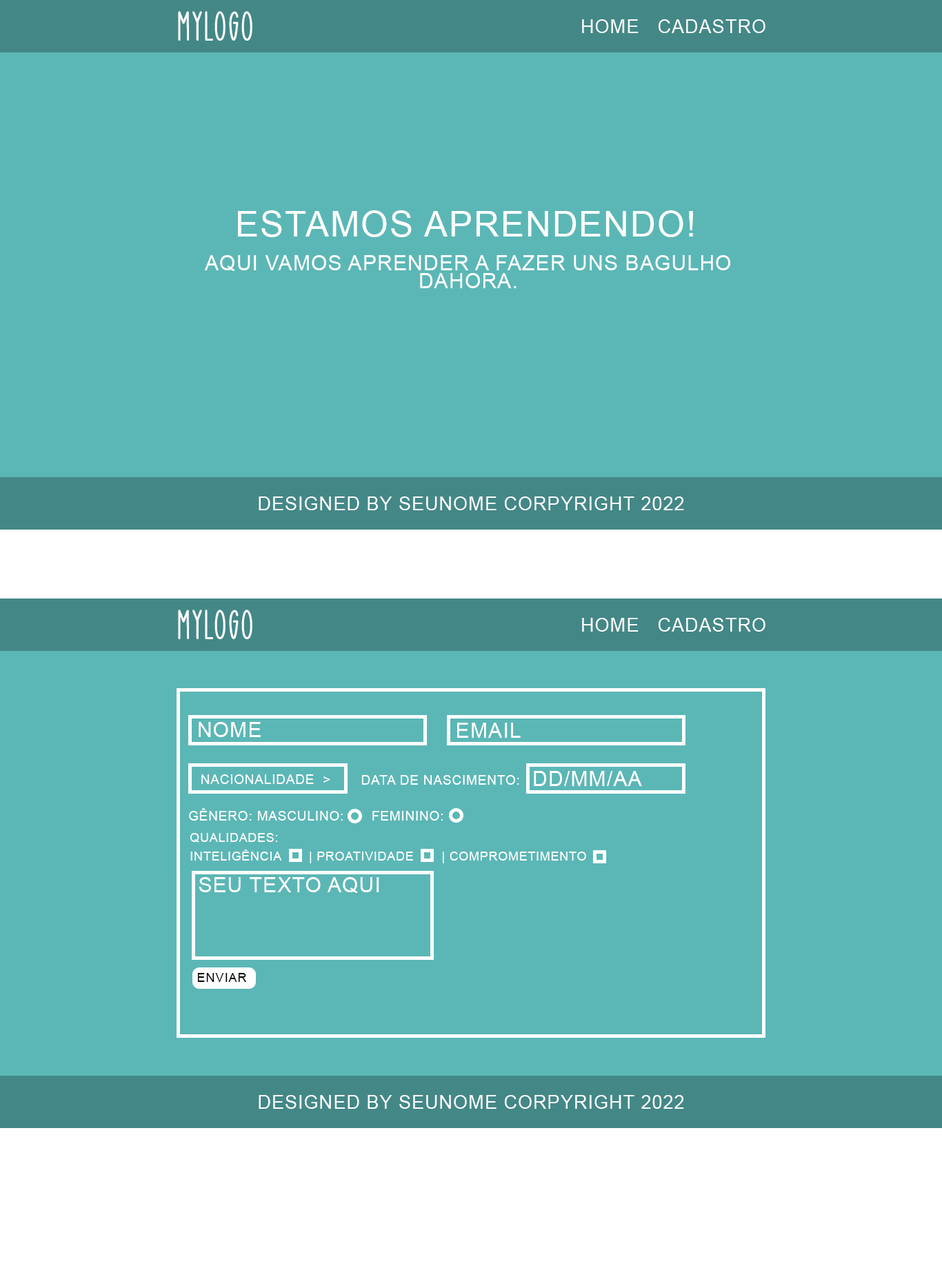
<style>
.page{position:relative;width:942px;height:1266px;background:#5bb7b6}
.page>*{position:absolute;margin:0}
.t1{font:41.9px "ChristmasLightRegular";letter-spacing:0.04em;color:#ffffff}
.t2{font:18.6px "ArialMT";letter-spacing:0.04em;color:#ffffff}
.t3{font:35.2px "ArialMT";letter-spacing:0.04em;color:#ffffff}
.t4{font:20.7px/18.3px "ArialMT";letter-spacing:0.04em;color:#ffffff}
.t5{font:20.7px "ArialMT";letter-spacing:0.04em;color:#ffffff}
.t6{font:13.1px "ArialMT";letter-spacing:0.04em;color:#ffffff}
.t7{font:13.2px "ArialMT";letter-spacing:0.04em;color:#ffffff}
.t8{font:12.4px/18.3px "ArialMT";letter-spacing:0.04em;color:#ffffff}
.t9{font:12.7px "ArialMT";letter-spacing:0.04em;color:#000000}
</style>
<div class="page">
<p class="t1" style="left:178px;top:11px;width:74px;height:30px">MyLogo</p>
<p class="t2" style="left:582px;top:19px;width:57px;height:14px">HOME</p>
<p class="t2" style="left:659px;top:19px;width:106px;height:14px">CADASTRO</p>
<p class="t3" style="left:238px;top:210px;width:455px;height:27px">ESTAMOS APRENDENDO!</p>
<p class="t4" style="left:204px;top:255px;width:526px;height:33px;text-align:center">AQUI VAMOS APRENDER A FAZER UNS BAGULHO <br>DAHORA.</p>
<p class="t2" style="left:259px;top:496px;width:425px;height:14px">DESIGNED BY SEUNOME CORPYRIGHT 2022</p>
<p class="t1" style="left:178px;top:610px;width:74px;height:29px">MyLogo</p>
<p class="t2" style="left:582px;top:618px;width:57px;height:14px">HOME</p>
<p class="t2" style="left:659px;top:618px;width:106px;height:14px">CADASTRO</p>
<p class="t5" style="left:199px;top:722px;width:62px;height:15px">NOME</p>
<p class="t5" style="left:457px;top:723px;width:64px;height:15px">EMAIL</p>
<p class="t5" style="left:534px;top:771px;width:108px;height:15px">DD/MM/AA</p>
<p class="t6" style="left:201px;top:774px;width:129px;height:10px">NACIONALIDADE  &gt;</p>
<p class="t7" style="left:361px;top:775px;width:158px;height:10px">DATA DE NASCIMENTO:</p>
<p class="t7" style="left:189px;top:808px;width:254px;height:13px">GÊNERO: MASCULINO: FEMININO:</p>
<p class="t8" style="left:190px;top:833px;width:396px;height:30px">QUALIDADES:<br>INTELIGÊNCIA       | PROATIVIDADE       | COMPROMETIMENTO</p>
<p class="t5" style="left:199px;top:877px;width:180px;height:17px">SEU TEXTO AQUI</p>
<p class="t9" style="left:197px;top:973px;width:50px;height:9px">ENVIAR</p>
<p class="t2" style="left:259px;top:1095px;width:425px;height:14px">DESIGNED BY SEUNOME CORPYRIGHT 2022</p>
</div>
